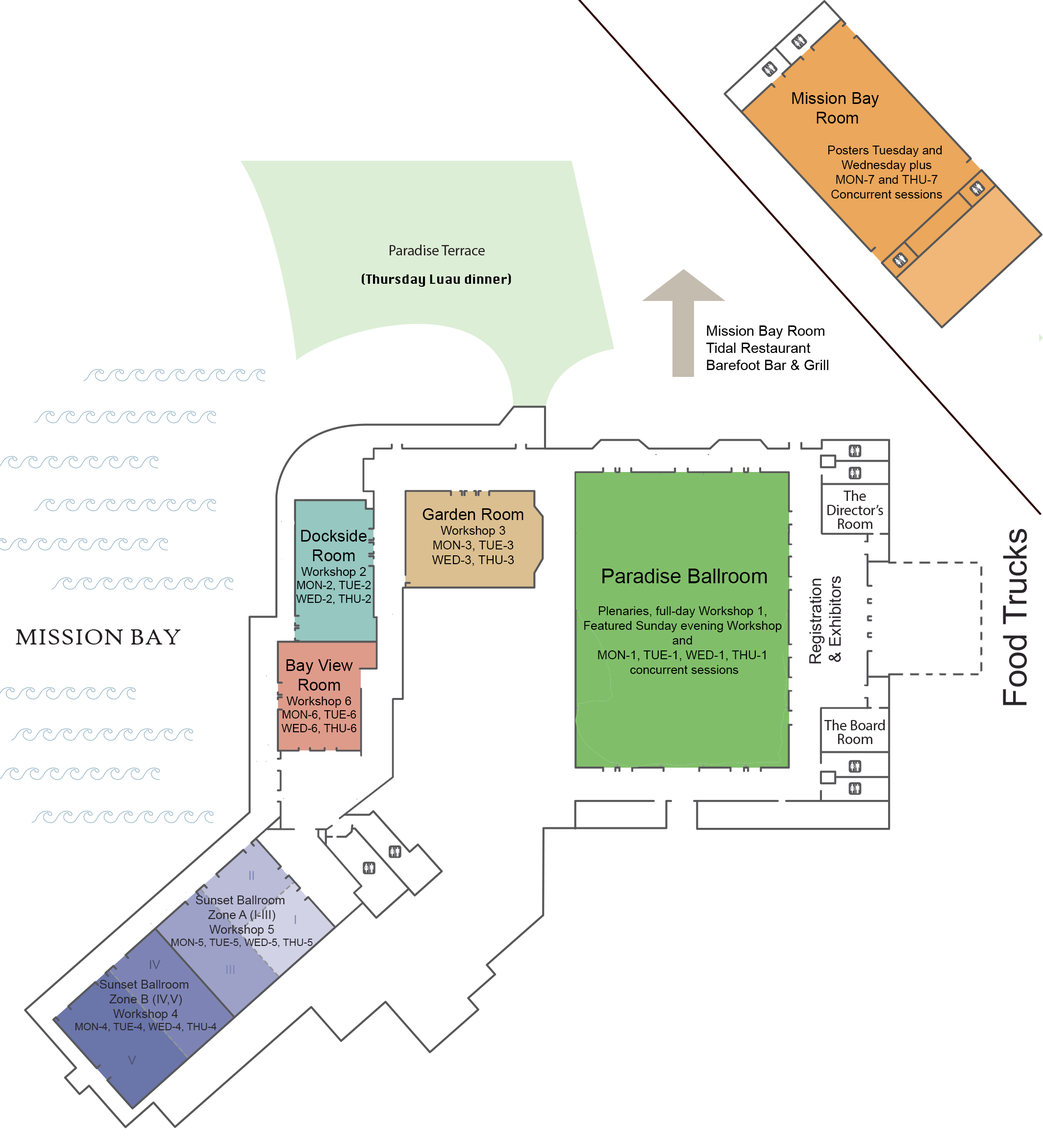
<style>
.page{position:relative;width:1043px;height:1143px;background:#ffffff}
.page>*{position:absolute;margin:0}
.t1{font:16.3px "ArialMT";color:#000000}
.t2{font:12.3px "ArialMT";color:#000000}
.t3{font:14.3px "ArialMT";color:#000000}
.t4{font:11.2px "ArialMT";color:#000000}
.t5{font:32.7px "ArialMT";color:#282528}
.t6{font:20.4px "ArialMT";color:#000000}
.t7{font:16.3px "ArialMT";color:#282528}
.t8{font:12.3px "ArialMT";color:#7d84b5}
.t9{font:12.3px "ArialMT";color:#282528}
.t10{font:10.2px "ArialMT";color:#282528}
.t11{font:12.3px "ArialMT";color:#4d5171}
</style>
<div class="page">
<p class="t1" style="left:792px;top:92px;width:87px;height:32px;text-align:center">Mission Bay <br>Room</p>
<p class="t2" style="left:828px;top:146px;width:115px;height:53px;text-align:center">Posters Tuesday and <br>Wednesday plus<br>MON-7 and THU-7<br>Concurrent sessions</p>
<p class="t3" style="left:706px;top:325px;width:122px;height:45px">Mission Bay Room<br>Tidal Restaurant<br>Barefoot Bar &amp; Grill</p>
<p class="t2" style="left:423px;top:508px;width:101px;height:58px;text-align:center"><span class="t1">Garden Room<br></span>Workshop 3<br>MON-3, TUE-3<br>WED-3, THU-3</p>
<p class="t4" style="left:296px;top:530px;width:75px;height:74px;text-align:center"><span class="t1">Dockside<br>Room<br></span><span class="t2">Workshop 2<br></span>MON-2, TUE-2<br>WED-2, THU-2</p>
<p class="t5" style="left:1003px;top:529px;width:24px;height:176px;rotate:-90deg">Food Trucks</p>
<p class="t2" style="left:584px;top:569px;width:198px;height:105px;text-align:center"><span class="t6">Paradise Ballroom<br><br></span>Plenaries, full-day Workshop 1, <br>Featured Sunday evening Workshop <br>and <br>MON-1, TUE-1, WED-1, THU-1 <br>concurrent sessions</p>
<p class="t7" style="left:809px;top:576px;width:32px;height:88px;text-align:center;rotate:-90deg">Registration <br>&amp; Exhibitors</p>
<p class="t4" style="left:281px;top:659px;width:75px;height:75px;text-align:center"><span class="t1">Bay View<br>Room<br></span><span class="t2">Workshop 6<br></span>MON-6, TUE-6<br>WED-6, THU-6</p>
<p class="t8" style="left:249px;top:871px;width:5px;height:9px">II</p>
<p class="t9" style="left:171px;top:896px;width:142px;height:52px;text-align:center">Sunset Ballroom <br>Zone A (I-III)<br>Workshop 5<br><span class="t10">MON-5, TUE-5, WED-5, THU-5</span></p>
<p class="t8" style="left:295px;top:915px;width:1px;height:9px">I</p>
<p class="t11" style="left:150px;top:960px;width:10px;height:9px">IV</p>
<p class="t8" style="left:226px;top:965px;width:9px;height:9px">III</p>
<p class="t9" style="left:75px;top:980px;width:142px;height:52px;text-align:center">Sunset Ballroom <br>Zone B (IV,V)<br>Workshop 4<br><span class="t10">MON-4, TUE-4, WED-4, THU-4</span></p>
<p class="t11" style="left:128px;top:1056px;width:8px;height:9px">V</p>
</div>
